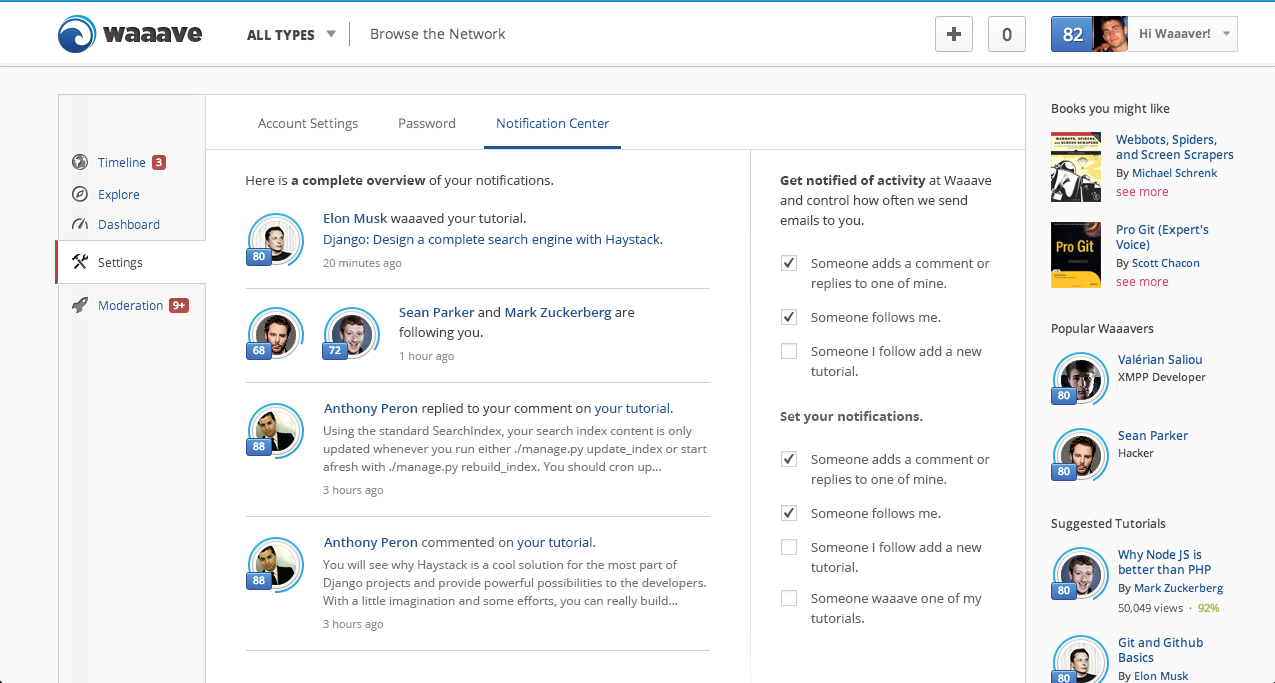
<style>
.page{position:relative;width:1275px;height:683px;background:#ffffff}
.page>*{position:absolute;margin:0}
.t1{font:13px "OpenSans";color:#454545}
.t2{font:13px "OpenSans-Bold";color:#454545}
.t3{font:13px/20px "OpenSans";color:#454545}
.t4{font:13px/20px "OpenSans-Bold";color:#454545}
.t5{font:13px "OpenSans-Semibold";color:#1f5691}
.t6{font:13px "OpenSans";color:#1f5691}
.t7{font:11px "OpenSans";color:#909090}
.t8{font:13px/20px "OpenSans";color:#606060}
.t9{font:13px/20px "OpenSans-Semibold";color:#1f5691}
.t10{font:13px "OpenSans";color:#606060}
.t11{font:13px "OpenSans-Bold";color:#606060}
.t12{font:12px/18px "OpenSans";color:#757575}
</style>
<div class="page">
<p class="t1" style="left:246px;top:175px;width:308px;height:13px">Here is <span class="t2">a complete overview</span> of your notifications.</p>
<p class="t3" style="left:780px;top:175px;width:212px;height:53px"><span class="t4">Get notified of activity</span> at Waaave<br>and control how often we send<br>emails to you.</p>
<p class="t1" style="left:324px;top:213px;width:202px;height:13px"><span class="t5">Elon Musk </span>waaaved your tutorial.</p>
<p class="t6" style="left:324px;top:234px;width:339px;height:13px">Django: Design a complete search engine with Haystack.</p>
<p class="t7" style="left:323px;top:259px;width:79px;height:11px">20 minutes ago</p>
<p class="t8" style="left:811px;top:258px;width:179px;height:33px">Someone adds a comment or<br>replies to one of mine.</p>
<p class="t3" style="left:399px;top:307px;width:236px;height:33px"><span class="t9">Sean Parker </span>and <span class="t9">Mark Zuckerberg </span>are<br>following you.</p>
<p class="t10" style="left:811px;top:312px;width:130px;height:10px">Someone follows me.</p>
<p class="t7" style="left:400px;top:352px;width:54px;height:11px">1 hour ago</p>
<p class="t8" style="left:811px;top:346px;width:171px;height:30px">Someone I follow add a new<br>tutorial.</p>
<p class="t1" style="left:324px;top:403px;width:349px;height:13px"><span class="t5">Anthony Peron </span>replied to your comment on <span class="t6">your tutorial</span><span class="t10">.</span></p>
<p class="t11" style="left:780px;top:411px;width:143px;height:13px">Set your notifications.</p>
<p class="t12" style="left:323px;top:426px;width:384px;height:48px">Using the standard SearchIndex, your search index content is only<br>updated whenever you run either ./manage.py update_index or start<br>afresh with ./manage.py rebuild_index. You should cron up...</p>
<p class="t8" style="left:811px;top:454px;width:179px;height:33px">Someone adds a comment or<br>replies to one of mine.</p>
<p class="t7" style="left:323px;top:486px;width:61px;height:11px">3 hours ago</p>
<p class="t10" style="left:811px;top:508px;width:130px;height:10px">Someone follows me.</p>
<p class="t5" style="left:324px;top:537px;width:272px;height:13px">Anthony Peron<span class="t10"> commented on </span><span class="t6">your tutorial</span><span class="t10">.</span></p>
<p class="t8" style="left:811px;top:542px;width:171px;height:30px">Someone I follow add a new<br>tutorial.</p>
<p class="t12" style="left:323px;top:560px;width:383px;height:48px">You will see why Haystack is a cool solution for the most part of<br>Django projects and provide powerful possibilities to the developers.<br>With a little imagination and some efforts, you can really build...</p>
<p class="t8" style="left:811px;top:593px;width:171px;height:30px">Someone waaave one of my<br>tutorials.</p>
<p class="t7" style="left:323px;top:620px;width:61px;height:11px">3 hours ago</p>
</div>
